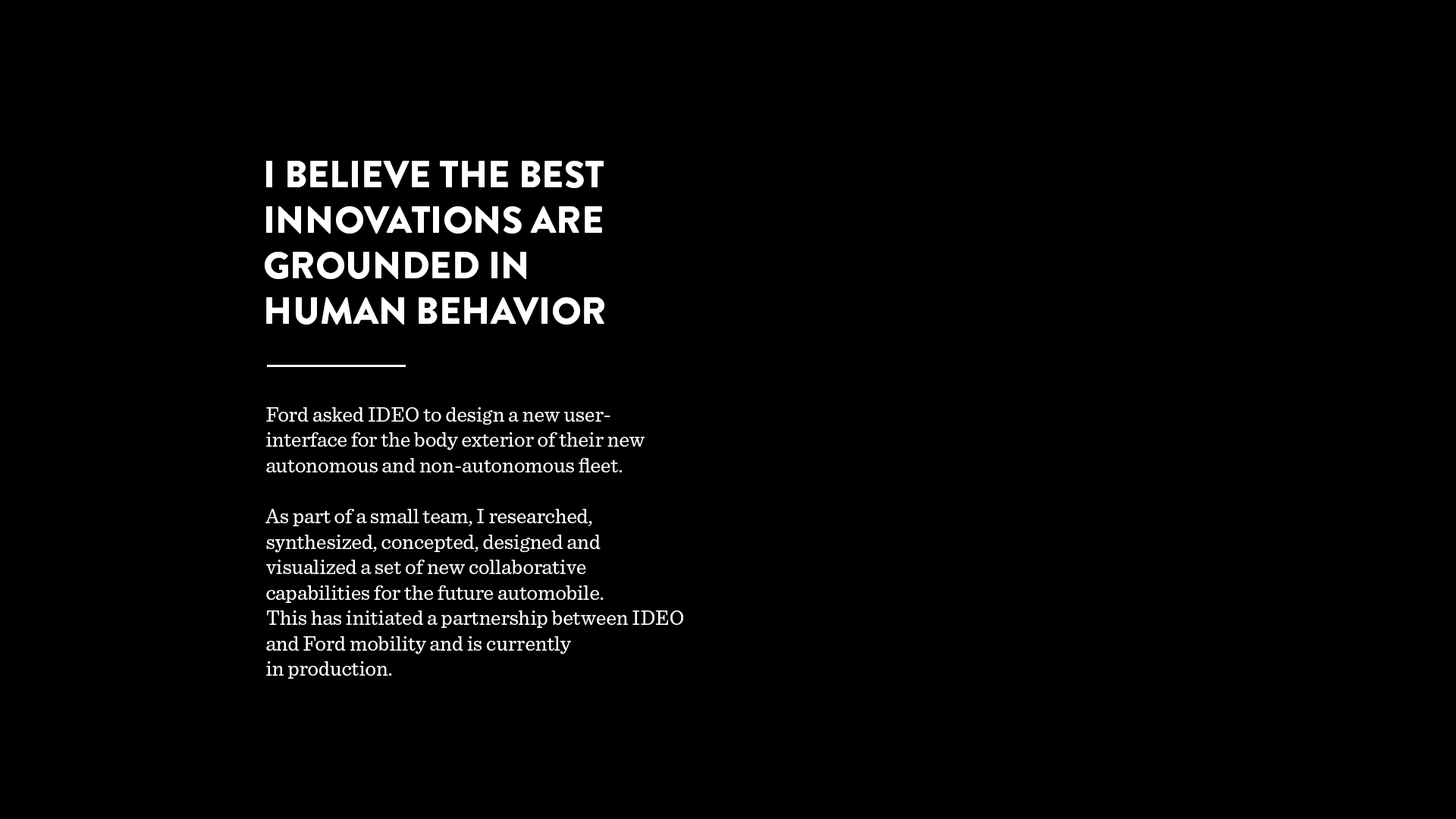
<style>
.page{position:relative;width:1456px;height:819px;background:#000000}
.page>*{position:absolute;margin:0}
.t1{font:37.9px "BrandonGrotesque-Black";color:#ffffff}
.t2{font:21.2px "Sentinel-Book";color:#ffffff}
</style>
<div class="page">
<p class="t1" style="left:265px;top:161px;width:339px;height:164px">I BELIEVE THE BEST <br>INNOVATIONS ARE GROUNDED IN<br>HUMAN BEHAVIOR</p>
<p class="t2" style="left:265px;top:407px;width:418px;height:272px">Ford asked IDEO to design a new user-<br>interface for the body exterior of their new <br>autonomous and non-autonomous fleet.<br><br>As part of a small team, I researched, <br>synthesized, concepted, designed and <br>visualized a set of new collaborative <br>capabilities for the future automobile. <br>This has initiated a partnership between IDEO and Ford mobility and is currently <br>in production.</p>
</div>
